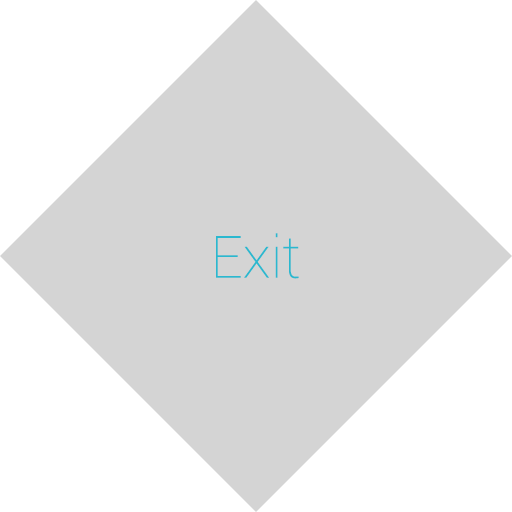
<style>
.page{position:relative;width:512px;height:512px;background:#ffffff}
.page>*{position:absolute;margin:0}
.t1{font:58.3px "Roboto-Thin";color:#2ab8cf}
</style>
<div class="page">
<p class="t1" style="left:216px;top:233px;width:83px;height:46px">Exit</p>
</div>
